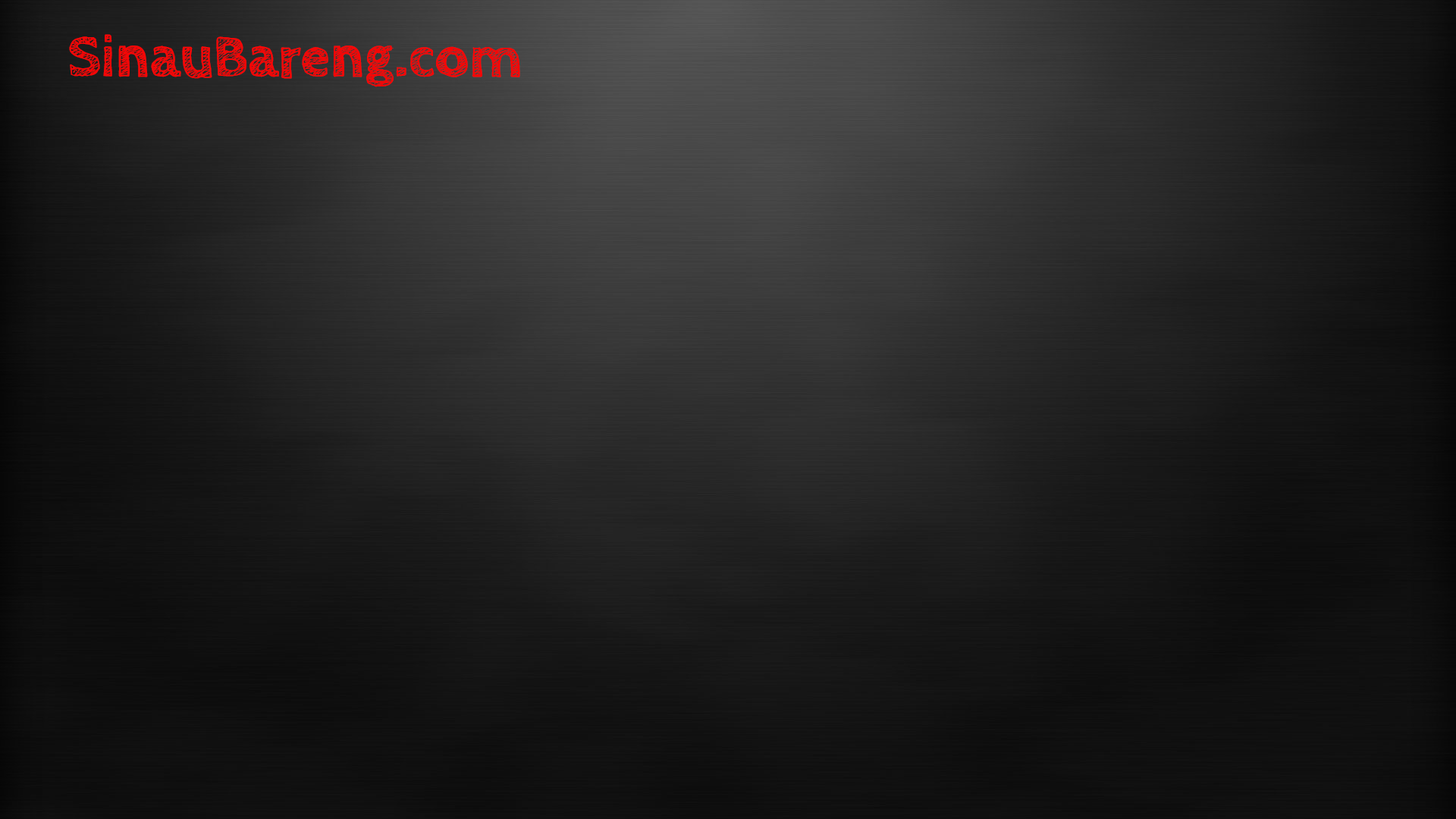
<style>
.page{position:relative;width:1456px;height:819px}
.page>*{position:absolute;margin:0}
.t1{font:59.9px "CabinSketch-Bold";color:#f60606}
</style>
<div class="page">
<p class="t1" style="left:69px;top:34px;width:451px;height:53px">SinauBareng.com</p>
</div>
